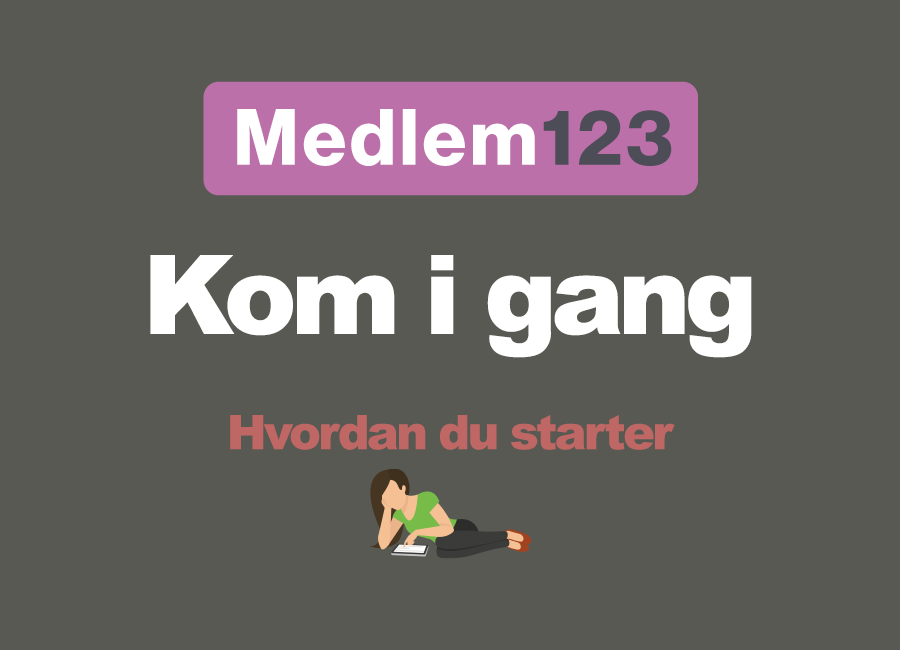
<style>
.page{position:relative;width:900px;height:650px;background:#585952}
.page>*{position:absolute;margin:0}
.t1{font:48px "Arial-Black";letter-spacing:-0.06em;color:#bf6764}
.t2{font:110px "Arial-Black";letter-spacing:-0.06em;color:#ffffff}
</style>
<div class="page">
<p class="t1" style="left:150px;top:255px;width:602px;height:195px;text-align:center"><span class="t2">Kom i gang<br><br></span>Hvordan du starter</p>
</div>
